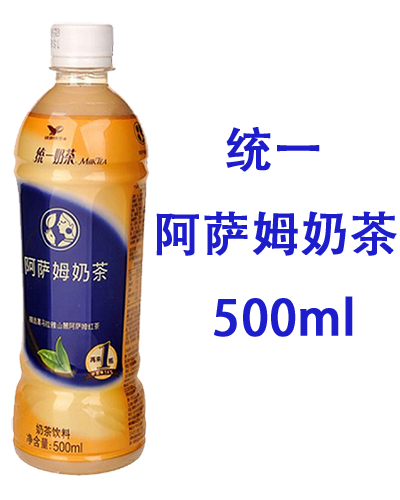
<style>
.page{position:relative;width:400px;height:500px;background:#ffffff}
.page>*{position:absolute;margin:0}
.t1{font:48px "AdobeHeitiStd-Regular";color:#1d1dcc;font-weight:bold}
</style>
<div class="page">
<p class="t1" style="left:156px;top:127px;width:241px;height:210px">统一<br>阿萨姆奶茶 <br>     500ml</p>
</div>
